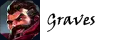
<style>
.page{position:relative;width:140px;height:40px;background:#ffffff}
.page>*{position:absolute;margin:0}
.t1{font:12px "VinerHandITC";color:#000000}
</style>
<div class="page">
<p class="t1" style="left:47px;top:13px;width:48px;height:19px">Graves</p>
</div>
